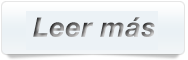
<style>
.page{position:relative;width:188px;height:60px;background:#ecf2f6}
.page>*{position:absolute;margin:0}
.t1{font:27px "HelveticaNeue-BoldItalic";letter-spacing:0.02em}
</style>
<div class="page">
<p class="t1" style="left:33px;top:17px;width:122px;height:20px">Leer más</p>
</div>
